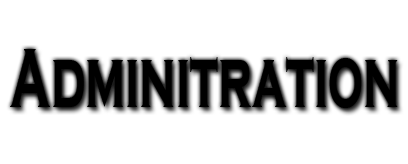
<style>
.page{position:relative;width:408px;height:164px;background:#ffffff}
.page>*{position:absolute;margin:0}
.t1{font:86.5px "CopperplateGothic-Bold";color:#000000;scale:0.57 1}
</style>
<div class="page">
<p class="t1" style="left:10px;top:49px;width:388px;height:59px">Adminitration</p>
</div>
